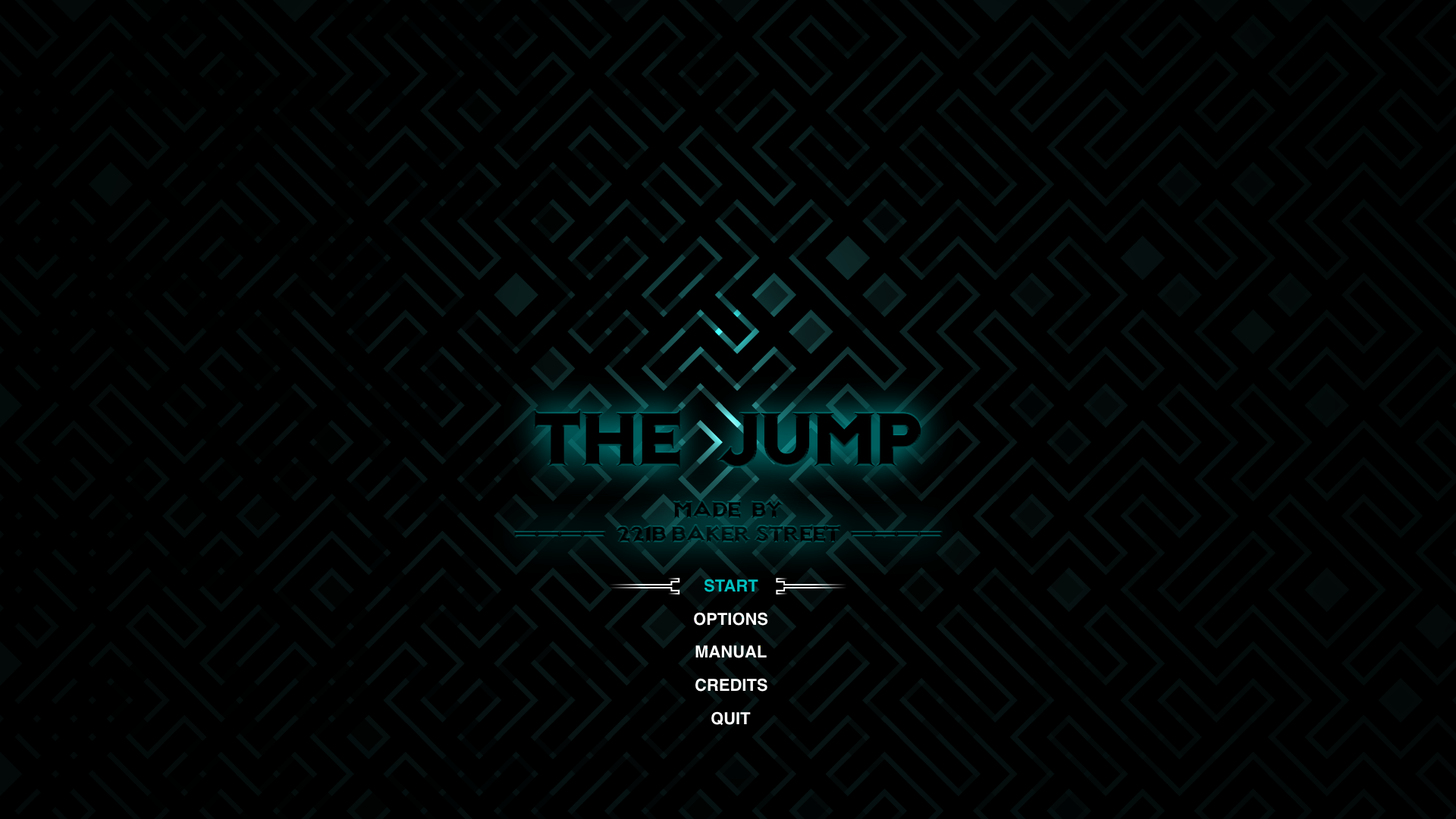
<style>
.page{position:relative;width:1456px;height:819px;background:#000000}
.page>*{position:absolute;margin:0}
.t1{font:75.8px "NotMaryKate";color:#000000}
.t2{font:22.7px "NotMaryKate";color:#000000}
.t3{font:16.7px "Helvetica-Bold";color:#00bfbf}
.t4{font:16.7px "Helvetica-Bold";color:#ffffff}
</style>
<div class="page">
<p class="t1" style="left:534px;top:409px;width:387px;height:60px">THE  JUMP</p>
<p class="t2" style="left:673px;top:500px;width:110px;height:19px">MADE  BY</p>
<p class="t3" style="left:704px;top:579px;width:54px;height:13px">START</p>
<p class="t4" style="left:694px;top:612px;width:74px;height:14px">OPTIONS</p>
<p class="t4" style="left:695px;top:645px;width:72px;height:13px">MANUAL</p>
<p class="t4" style="left:695px;top:678px;width:72px;height:14px">CREDITS</p>
<p class="t4" style="left:711px;top:711px;width:40px;height:15px">QUIT</p>
</div>
